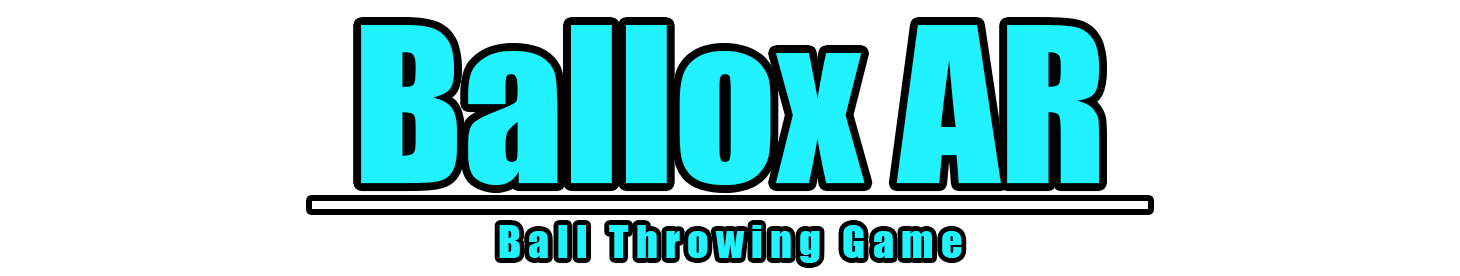
<style>
.page{position:relative;width:1460px;height:276px;background:#ffffff}
.page>*{position:absolute;margin:0}
.t1{font:200px "Impact";color:#21f2ff}
.t2{font:41.7px "Impact";color:#21f2ff}
</style>
<div class="page">
<p class="t1" style="left:361px;top:25px;width:738px;height:160px">Ballox AR</p>
<p class="t2" style="left:499px;top:225px;width:463px;height:38px">B a l l   T h r o w i n g   G a m e</p>
</div>
